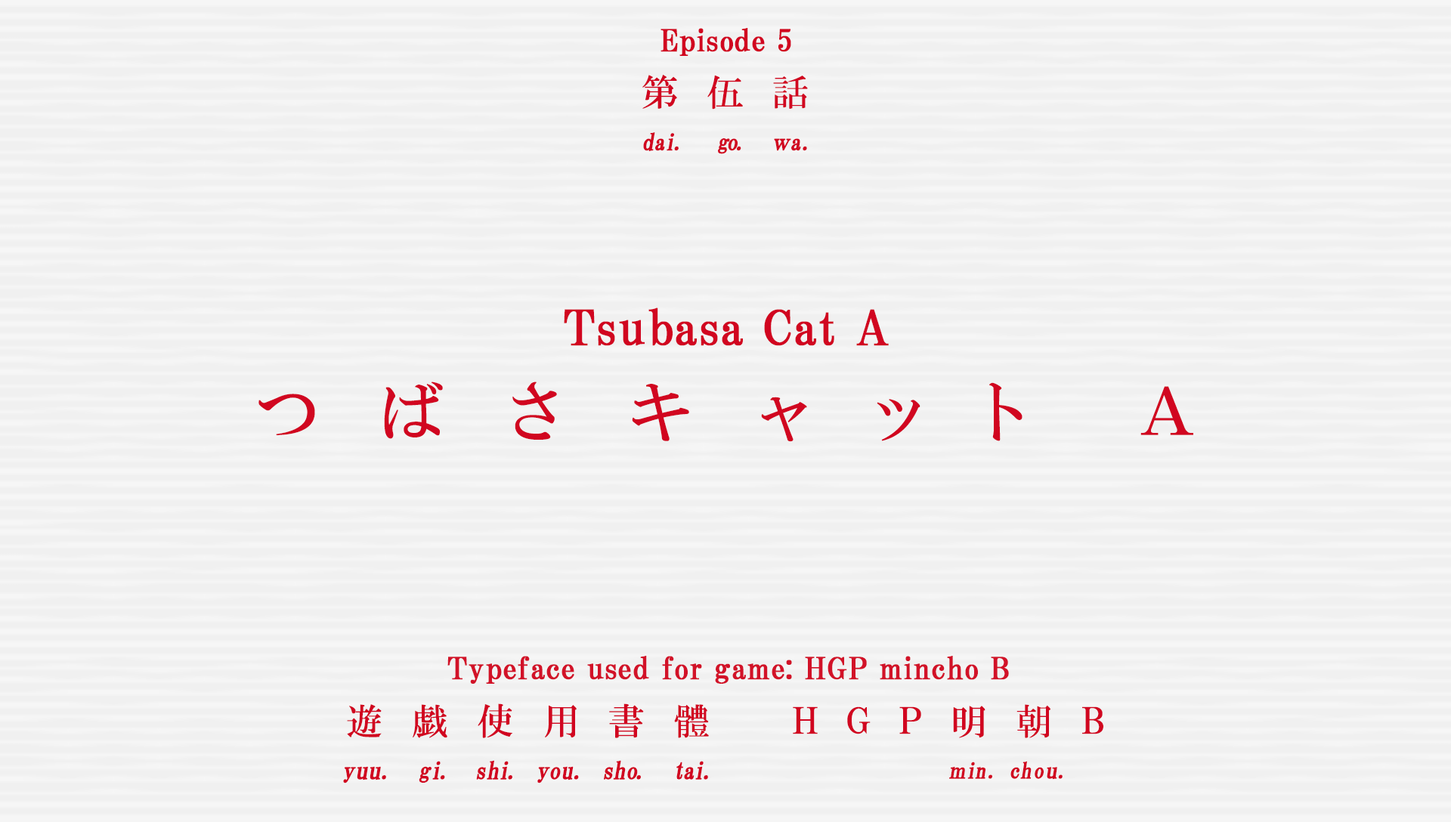
<style>
.page{position:relative;width:1451px;height:822px;background:#f0f0f0}
.page>*{position:absolute;margin:0}
.t1{font:30.2px "HGPMinchoB";letter-spacing:0.01em;color:#d10620;font-weight:bold}
.t2{font:36.5px "HGMinchoB";letter-spacing:0.79em;color:#d10620}
.t3{font:23.2px "HGMinchoB";letter-spacing:-0.1em;color:#d10620;font-weight:bold;scale:0.96 1}
.t4{font:23.2px "HGMinchoB";color:#d10620;font-weight:bold;scale:0.96 1}
.t5{font:23.2px "HGMinchoB";letter-spacing:-0.075em;color:#d10620;font-weight:bold;scale:0.96 1}
.t6{font:23.2px "HGMinchoB";letter-spacing:0.07em;color:#d10620;font-weight:bold;scale:0.96 1}
.t7{font:23.2px "HGMinchoB";letter-spacing:-0.05em;color:#d10620;font-weight:bold;scale:0.86 1}
.t8{font:48.4px "HGPMinchoB";letter-spacing:0.01em;color:#d10620;font-weight:bold}
.t9{font:65.7px "HGMinchoB";letter-spacing:0.89em;color:#d10620}
.t10{font:65.7px "HGMinchoB";letter-spacing:0.75em;color:#d10620}
.t11{font:65.7px "HGMinchoB";letter-spacing:0.55em;color:#d10620}
.t12{font:65.7px "HGMinchoB";letter-spacing:0.47em;color:#d10620}
.t13{font:30.2px "HGPMinchoB";letter-spacing:0.01em;color:#d21228;font-weight:bold}
.t14{font:36.3px "HGMinchoB";letter-spacing:0.81em;color:#d10620}
.t15{font:36.3px "HGMinchoB";letter-spacing:0.8em;color:#d10620}
.t16{font:36.3px "HGMinchoB";letter-spacing:0.79em;color:#d10620}
.t17{font:36.3px "HGMinchoB";letter-spacing:0.71em;color:#d10620;scale:0.85 1}
.t18{font:36.3px "HGMinchoB";letter-spacing:0.53em;color:#d10620}
.t19{font:24.2px "HGMinchoB";color:#d10620;font-weight:bold}
.t20{font:24.2px "HGMinchoB";letter-spacing:0.025em;color:#d10620;font-weight:bold;scale:0.96 1}
.t21{font:24.2px "HGMinchoB";letter-spacing:0.075em;color:#d10620;font-weight:bold;scale:0.96 1}
.t22{font:24.2px "HGMinchoB";letter-spacing:-0.025em;color:#d10620;font-weight:bold;scale:0.96 1}
.t23{font:24.2px "HGMinchoB";letter-spacing:-0.11em;color:#d10620;font-weight:bold;scale:0.96 1}
.t24{font:24.2px "HGMinchoB";color:#d10620;font-weight:bold;scale:0.96 1}
.t25{font:24.2px "HGMinchoB";letter-spacing:-0.05em;color:#d10620;font-weight:bold;scale:0.96 1}
.t26{font:24.2px "HGMinchoB";letter-spacing:-0.12em;color:#d10620;font-weight:bold;scale:0.96 1}
.t27{font:24.2px "HGMinchoB";letter-spacing:-0.01em;color:#d10620;font-weight:bold;scale:0.96 1}
.t28{font:24.2px "HGMinchoB";letter-spacing:0.005em;color:#d10620;font-weight:bold;scale:0.96 1}
.t29{font:24.2px "HGMinchoB";letter-spacing:-0.09em;color:#d10620;font-weight:bold;scale:0.96 1}
.t30{font:24.2px "HGMinchoB";letter-spacing:-0.075em;color:#d10620;font-weight:bold;scale:0.96 1}
.t31{font:24.2px "HGMinchoB";letter-spacing:-0.1em;color:#d10620;font-weight:bold;scale:0.96 1}
.t32{font:22px "HGMinchoB";letter-spacing:0.07em;color:#d10620;font-weight:bold;scale:0.96 1}
.t33{font:22px "HGMinchoB";letter-spacing:-0.075em;color:#d10620;font-weight:bold;scale:0.83 1}
.t34{font:22px "HGMinchoB";letter-spacing:-0.075em;color:#d10620;font-weight:bold;scale:0.96 1}
.t35{font:22px "HGMinchoB";color:#d10620;font-weight:bold;scale:0.96 1}
.t36{font:22px "HGMinchoB";letter-spacing:0.05em;color:#d10620;font-weight:bold;scale:0.96 1}
.t37{font:22px "HGMinchoB";letter-spacing:0.01em;color:#d10620;font-weight:bold;scale:1.06 1}
</style>
<div class="page">
<p class="t1" style="left:660px;top:28px;width:131px;height:28px">Episode 5</p>
<p class="t2" style="left:642px;top:75px;width:166px;height:35px">第伍話</p>
<p class="t3" style="left:643px;top:132px;width:164px;height:22px"><span class="t4">d</span><span class="t5">a</span>i<span class="t6">.  </span>go<span class="t6">.  </span><span class="t7">ｗ</span><span class="t4">a</span><span class="t6">.</span></p>
<p class="t8" style="left:564px;top:308px;width:325px;height:38px">Tsubasa Cat A</p>
<p class="t9" style="left:258px;top:382px;width:935px;height:60px">つばさキ<span class="t10">ャ</span><span class="t11">ット</span><span class="t12"> Ａ</span></p>
<p class="t13" style="left:447px;top:656px;width:562px;height:28px">Typeface used for game: HGP mincho B</p>
<p class="t14" style="left:347px;top:703px;width:362px;height:35px">遊<span class="t15">戯</span>使<span class="t16">用</span>書體</p>
<p class="t17" style="left:793px;top:706px;width:310px;height:28px">ＨＧＰ    Ｂ</p>
<p class="t16" style="left:953px;top:704px;width:97px;height:34px">明<span class="t18">朝</span></p>
<p class="t19" style="left:343px;top:760px;width:365px;height:23px"><span class="t20">y</span>uu<span class="t21">. </span><span class="t22">g</span><span class="t23">i</span><span class="t21">. </span><span class="t24">s</span><span class="t25">h</span><span class="t26">i</span><span class="t21">. </span><span class="t27">y</span><span class="t28">ou</span><span class="t21">. </span><span class="t22">s</span><span class="t24">h</span><span class="t29">o</span><span class="t21">.  </span><span class="t30">t</span><span class="t31">ai</span><span class="t21">.</span></p>
<p class="t32" style="left:949px;top:761px;width:113px;height:19px"><span class="t33">ｍ</span><span class="t34">i</span>n. <span class="t35">c</span>h<span class="t36">o</span><span class="t37">u</span>.</p>
</div>
